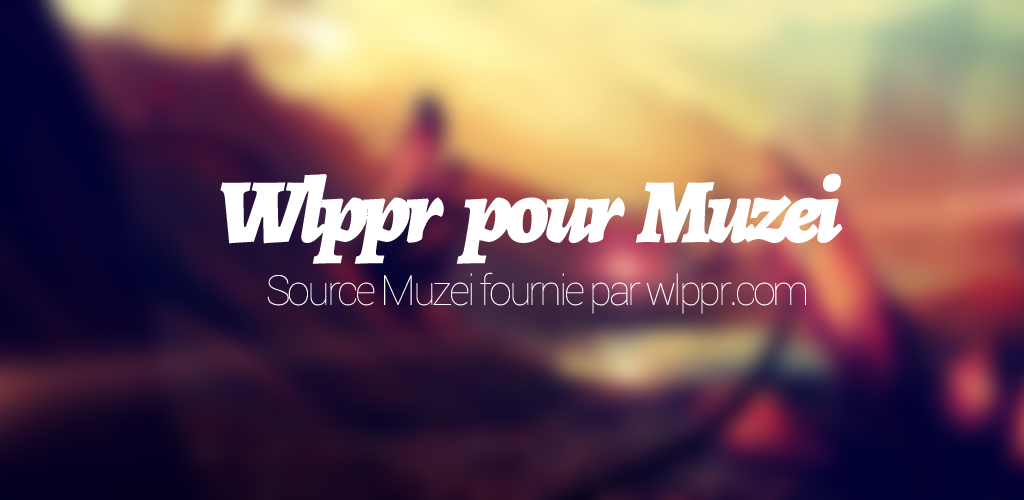
<style>
.page{position:relative;width:1024px;height:500px}
.page>*{position:absolute;margin:0}
.t1{font:91.7px "Alegreya-BlackItalic";letter-spacing:-0.076em;color:#ffffff}
.t2{font:41.7px "Roboto-Thin";letter-spacing:-0.076em;color:#ffffff}
</style>
<div class="page">
<p class="t1" style="left:220px;top:173px;width:623px;height:91px">Wlppr     pour    Muzei</p>
<p class="t2" style="left:267px;top:272px;width:539px;height:42px">Source Muzei fournie par wlppr.com</p>
</div>
